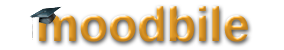
<style>
.page{position:relative;width:284px;height:50px;background:#ffffff}
.page>*{position:absolute;margin:0}
.t1{font:48px "LiberationSans-Bold";color:#d38f24}
</style>
<div class="page">
<p class="t1" style="left:39px;top:6px;width:209px;height:36px">moodbile</p>
</div>
